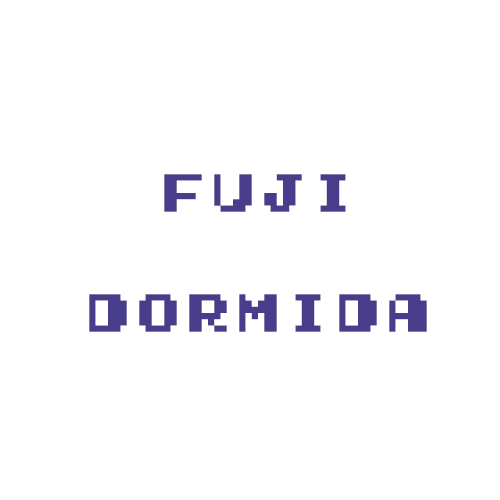
<style>
.page{position:relative;width:500px;height:500px;background:#ffffff}
.page>*{position:absolute;margin:0}
.t1{font:50px "GamegirlClassic";color:#483d8b}
.t2{font:29px "GamegirlClassic";color:#483d8b}
</style>
<div class="page">
<p class="t1" style="left:89px;top:174px;width:338px;height:158px;text-align:center"><span class="t2"><br></span><br>FUJI <br><br>DORMIDA</p>
</div>
